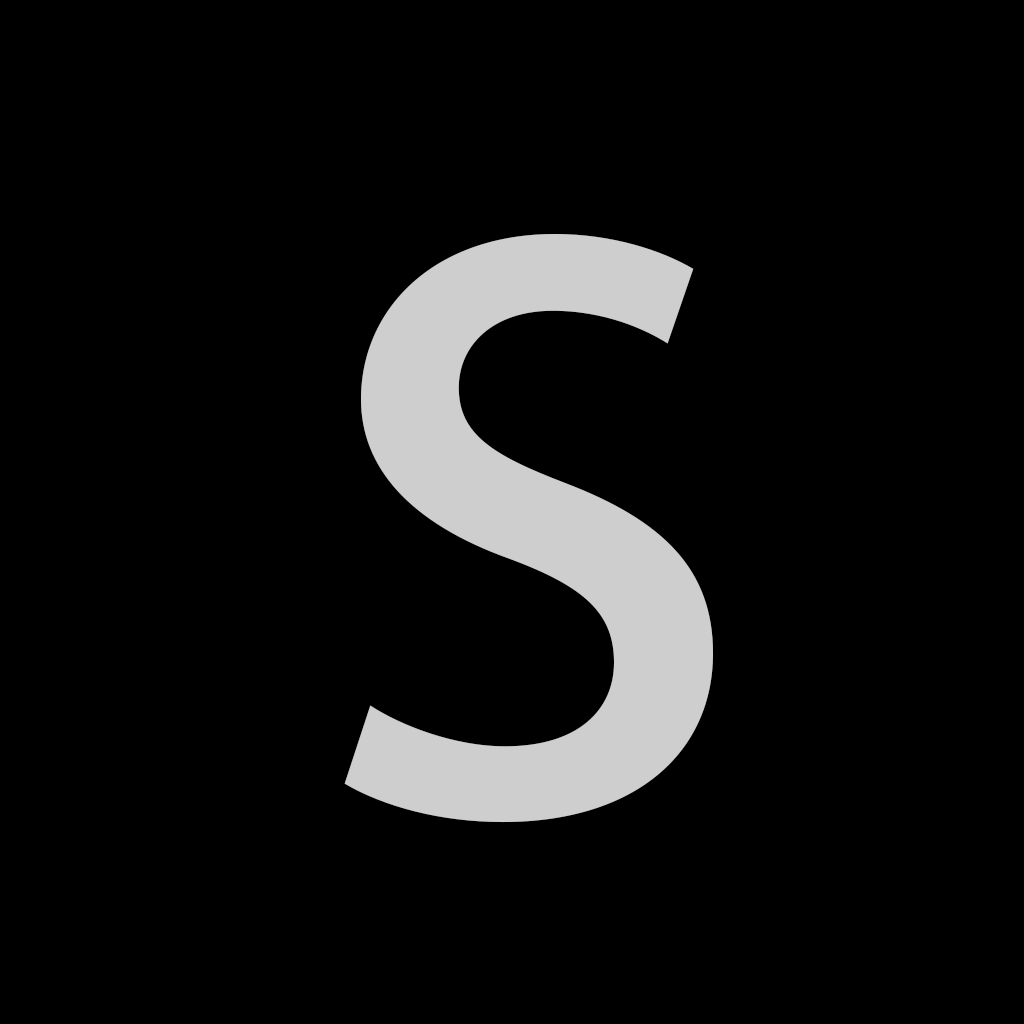
<style>
.page{position:relative;width:1024px;height:1024px;background:#000000}
.page>*{position:absolute;margin:0}
.t1{font:1164px "MyriadPro-Regular";color:#cecece}
</style>
<div class="page">
<p class="t1" style="left:344px;top:234px;width:369px;height:589px">s</p>
</div>
